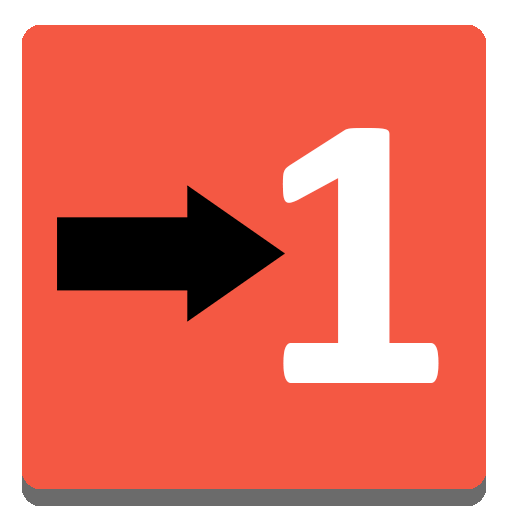
<style>
.page{position:relative;width:512px;height:512px;background:#f45843}
.page>*{position:absolute;margin:0}
.t1{font:400px "Calibri-Bold";color:#ffffff}
</style>
<div class="page">
<p class="t1" style="left:282px;top:128px;width:157px;height:255px">1</p>
</div>
